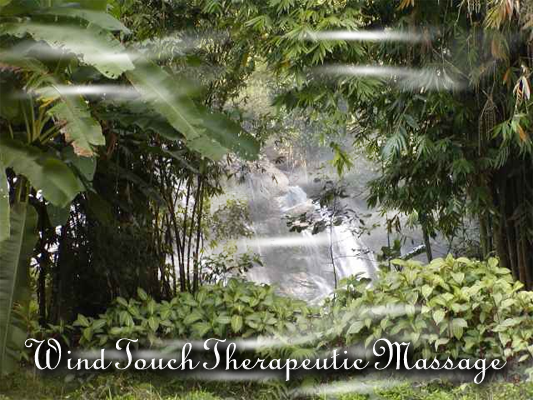
<style>
.page{position:relative;width:533px;height:400px}
.page>*{position:absolute;margin:0}
.t1{font:48px "TypoUprightBT-Regular";color:#ffffff}
</style>
<div class="page">
<p class="t1" style="left:24px;top:338px;width:483px;height:46px">Wind Touch Therapeutic Massage</p>
</div>
